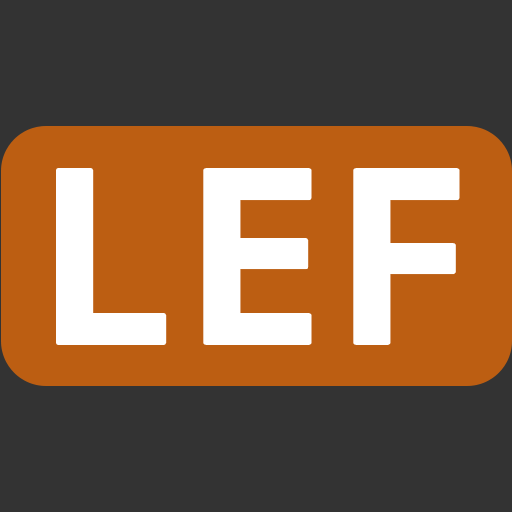
<style>
.page{position:relative;width:512px;height:512px;background:#333333}
.page>*{position:absolute;margin:0}
.t1{font:271px "Consolas-Bold";color:#ffffff}
</style>
<div class="page">
<p class="t1" style="left:58px;top:170px;width:400px;height:173px">LEF</p>
</div>
